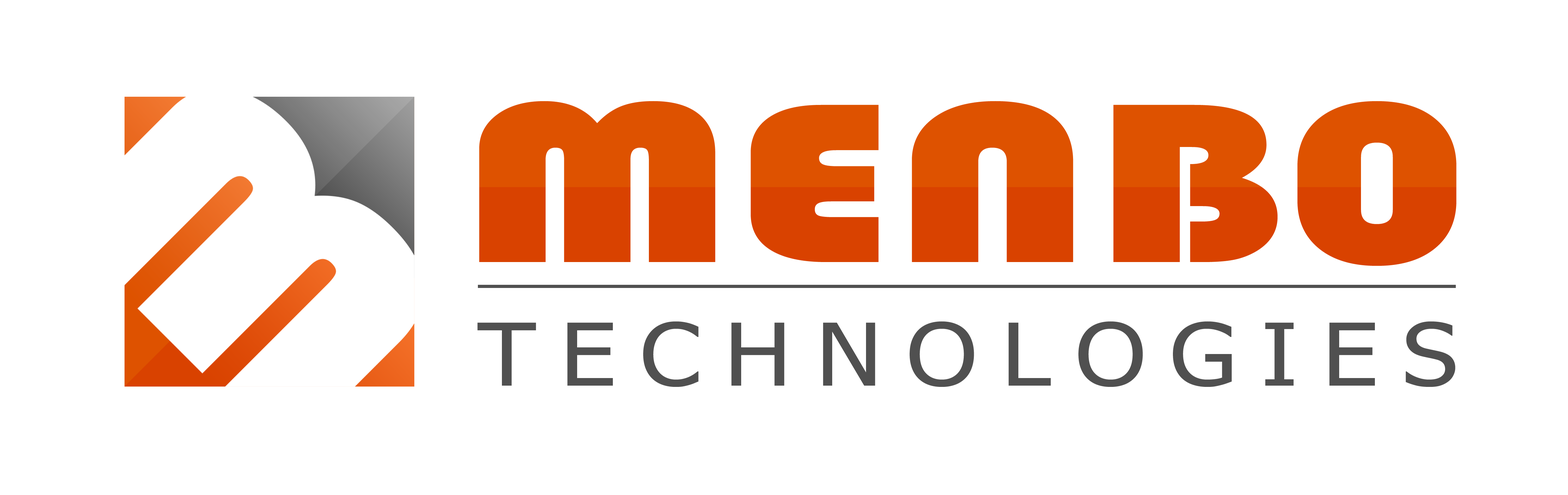
<style>
.page{position:relative;width:1568px;height:495px;background:#ffffff}
.page>*{position:absolute;margin:0}
.t1{font:235.3px "Bauhaus93";color:#d94200;scale:1.42 1}
.t2{font:86.5px "Tahoma";letter-spacing:0.24em;color:#505050;scale:1.16 1}
</style>
<div class="page">
<p class="t1" style="left:479px;top:101px;width:977px;height:165px">MENB0</p>
<p class="t2" style="left:477px;top:321px;width:978px;height:66px">TECHNOLOGIES</p>
</div>
